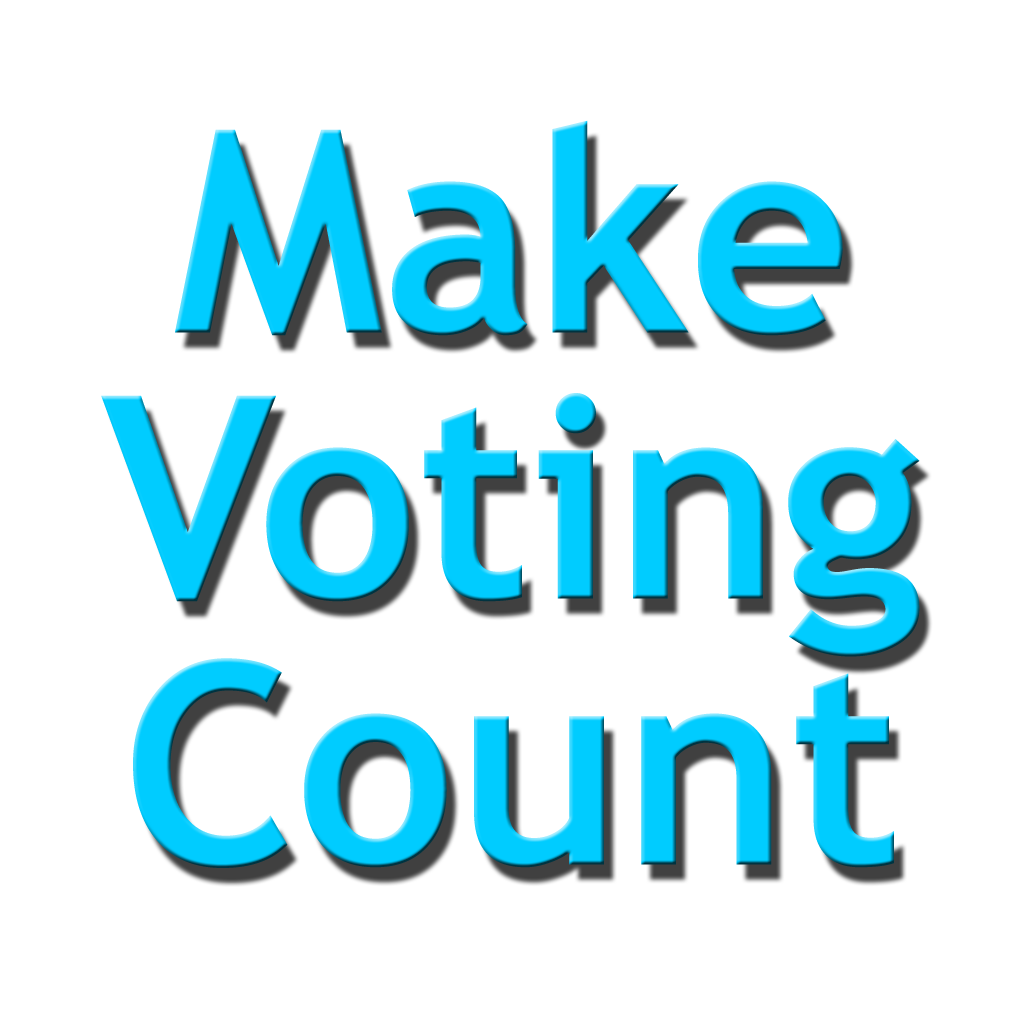
<style>
.page{position:relative;width:1024px;height:1024px;background:#ffffff}
.page>*{position:absolute;margin:0}
.t1{font:283px/266px "TrebuchetMS-Bold";color:#00ccff}
</style>
<div class="page">
<p class="t1" style="left:101px;top:120px;width:819px;height:748px;text-align:center">Make<br>Voting<br>Count</p>
</div>
